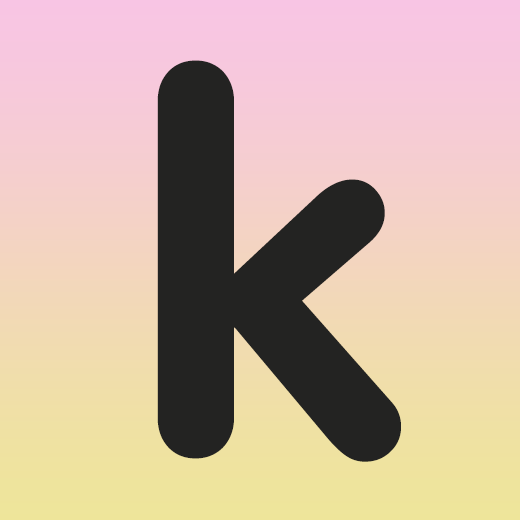
<style>
.page{position:relative;width:520px;height:520px}
.page>*{position:absolute;margin:0}
.t1{font:512.6px "VAG-Rounded-Bold";color:#232322;scale:1.03 1}
</style>
<div class="page">
<p class="t1" style="left:157px;top:60px;width:244px;height:402px">k</p>
</div>
